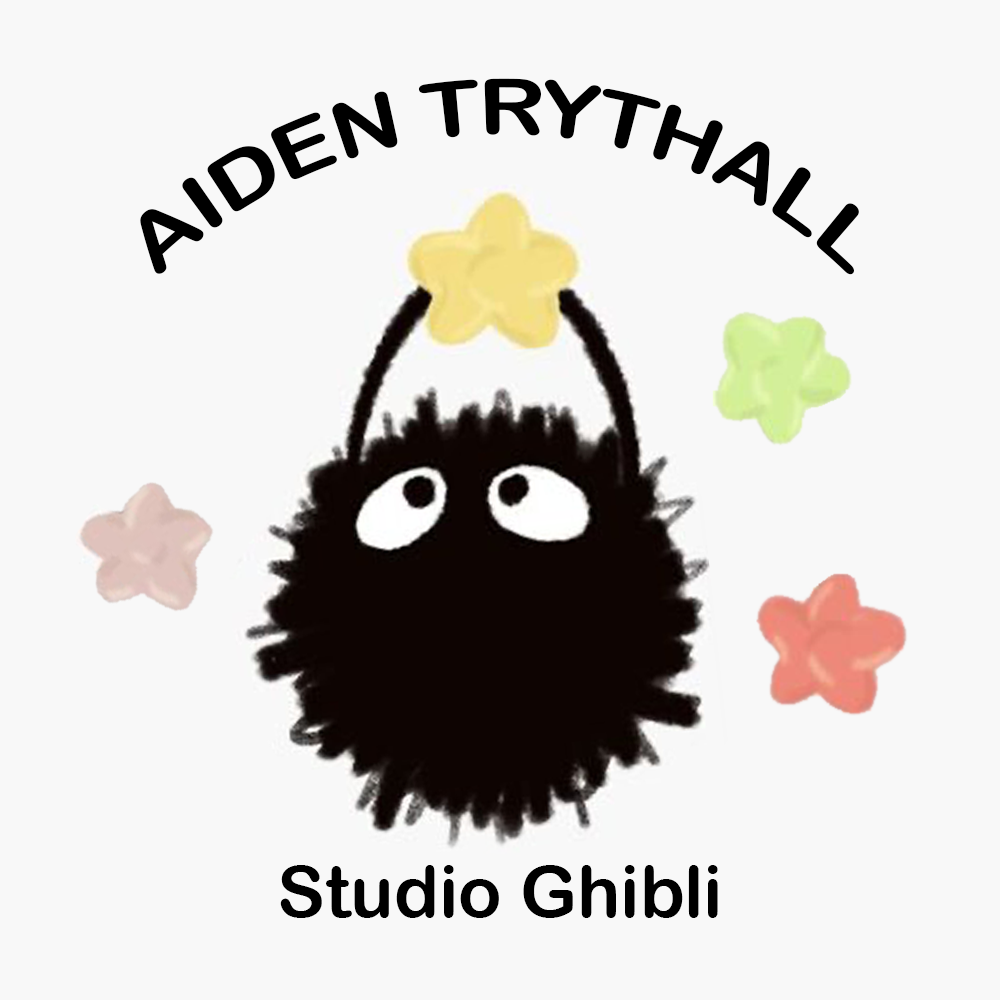
<style>
.page{position:relative;width:1000px;height:1000px;background:#f8f8f8}
.page>*{position:absolute;margin:0}
.t1{font:77.2px "ArialRoundedMTBold";color:#000000}
.t2{font:72px "ArialRoundedMTBold";color:#000000}
</style>
<div class="page">
<p class="t1" style="left:140px;top:78px;width:719px;height:197px">AIDEN TRYTHALL</p>
<p class="t2" style="left:280px;top:865px;width:438px;height:53px">Studio Ghibli</p>
</div>
